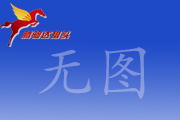
<style>
.page{position:relative;width:180px;height:120px}
.page>*{position:absolute;margin:0}
.t1{font:60px "FZKTJW--GB1-0";color:#8094dc}
</style>
<div class="page">
<p class="t1" style="left:38px;top:47px;width:108px;height:52px">无图</p>
</div>
